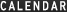
<style>
.page{position:relative;width:67px;height:12px}
.page>*{position:absolute;margin:0}
.t1{font:12.2px "HCRDotum-Bold";letter-spacing:0.26em;color:#ffffff;scale:0.76 1}
</style>
<div class="page">
<p class="t1" style="left:0px;top:1px;width:66px;height:10px">CALENDAR</p>
</div>
